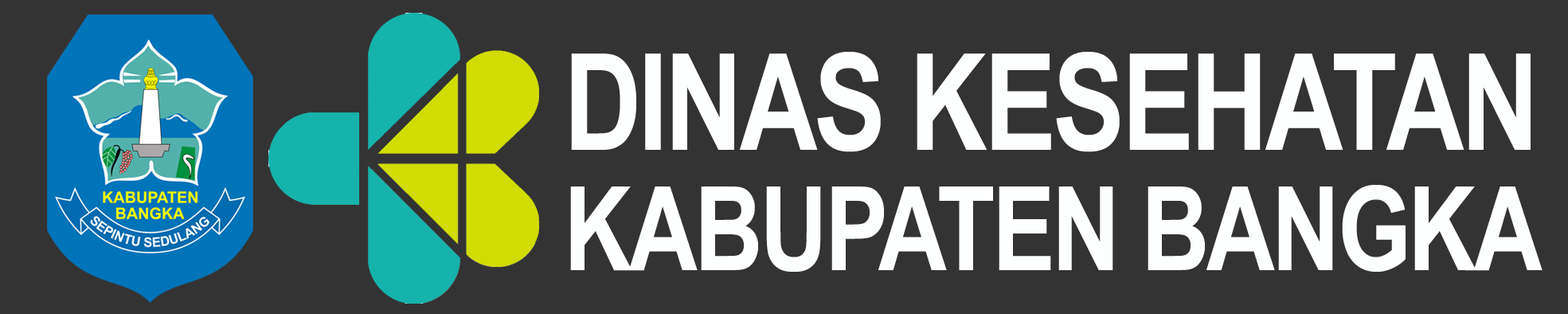
<style>
.page{position:relative;width:1568px;height:314px;background:#333333}
.page>*{position:absolute;margin:0}
.t1{font:134.4px "Arial-BoldMT";letter-spacing:-0.03em;color:#feffff;text-transform:uppercase;scale:0.8 1}
.t2{font:116.8px "Arial-BoldMT";letter-spacing:-0.03em;color:#feffff;text-transform:uppercase;scale:0.81 1}
</style>
<div class="page">
<p class="t1" style="left:571px;top:52px;width:960px;height:100px">dinas kesehatan</p>
<p class="t2" style="left:570px;top:185px;width:973px;height:87px">kabupaten bangka</p>
</div>
